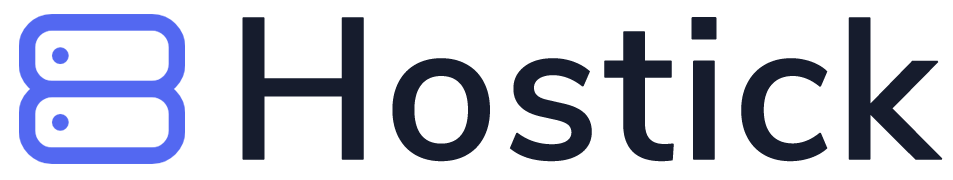
<style>
.page{position:relative;width:953px;height:180px;background:#ffffff}
.page>*{position:absolute;margin:0}
.t1{font:200px "NunitoSans-SemiBold";color:#161c2d;font-weight:bold}
</style>
<div class="page">
<p class="t1" style="left:242px;top:17px;width:701px;height:145px">Hostick</p>
</div>
